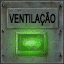
<style>
.page{position:relative;width:64px;height:64px}
.page>*{position:absolute;margin:0}
.t1{font:12px "ArialMT";color:#000000;font-weight:bold;scale:0.59 1}
</style>
<div class="page">
<p class="t1" style="left:9px;top:12px;width:47px;height:14px">VENTILAÇÃO</p>
</div>
